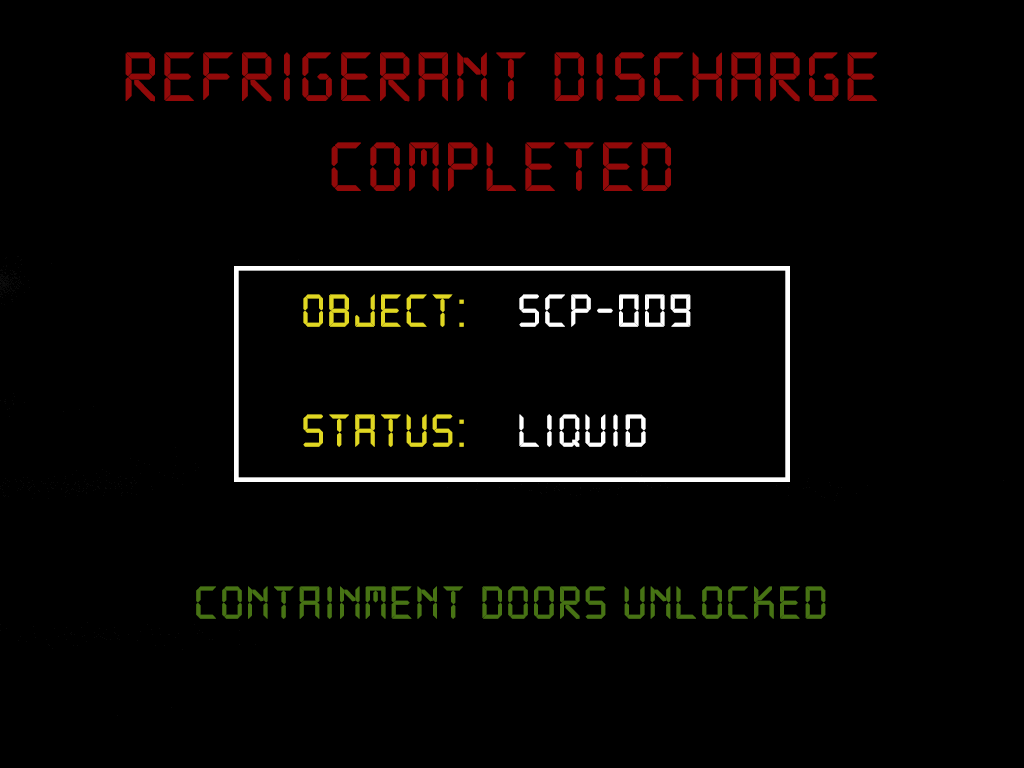
<style>
.page{position:relative;width:1024px;height:768px;background:#000000}
.page>*{position:absolute;margin:0}
.t1{font:75px "DS-Digital";color:#920909;font-weight:bold}
.t2{font:12px "DS-Digital";color:#e0d722;font-weight:bold}
.t3{font:12px "DS-Digital";color:#ffffff;font-weight:bold}
.t4{font:12px "DS-Digital";color:#477314;font-weight:bold}
</style>
<div class="page">
<p class="t1" style="left:125px;top:52px;width:752px;height:139px;text-align:center">Refrigerant discharge completed</p>
<p class="t2" style="left:303px;top:294px;width:388px;height:153px">Object:<span class="t3">  SCP-009<br><br></span>Status:<span class="t3">  liquid</span></p>
<p class="t4" style="left:196px;top:586px;width:630px;height:33px;text-align:center">Containment doors unlocked</p>
</div>
